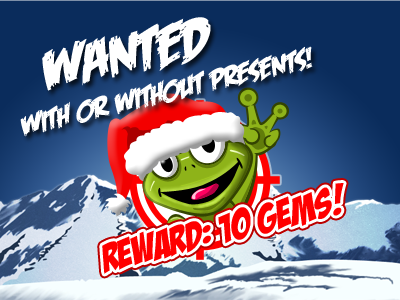
<style>
.page{position:relative;width:400px;height:300px}
.page>*{position:absolute;margin:0}
.t1{font:60px "FeastofFleshBBItalic";letter-spacing:-0.005em;color:#ffffff}
.t2{font:30px "FeastofFleshBBItalic";letter-spacing:-0.005em;color:#ffffff}
.t3{font:39.6px "BadaBoomBB";letter-spacing:0.005em;color:#ff0101}
</style>
<div class="page">
<p class="t1" style="left:42px;top:17px;width:169px;height:74px;rotate:-11deg">wanted</p>
<p class="t2" style="left:20px;top:46px;width:293px;height:91px;rotate:-13deg">With or without presents!</p>
<p class="t3" style="left:102px;top:183px;width:242px;height:91px;rotate:-14deg">Reward: 10 Gems!</p>
<p class="t3" style="left:102px;top:183px;width:242px;height:91px;rotate:-14deg">Reward: 10 Gems!</p>
</div>
